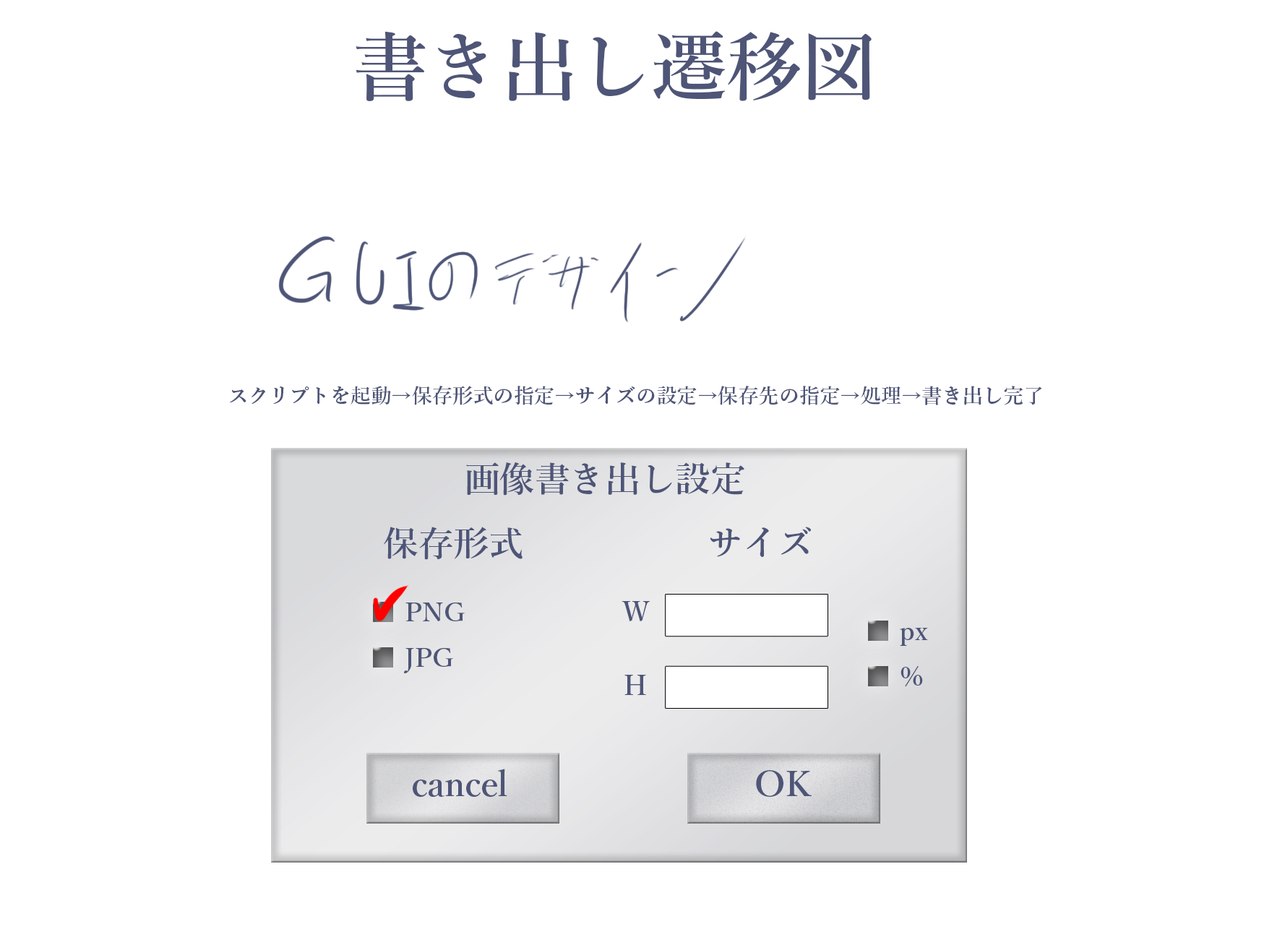
<style>
.page{position:relative;width:1272px;height:937px;background:#ffffff}
.page>*{position:absolute;margin:0}
.t1{font:74.9px "YuMin-Demibold";color:#4e5577}
.t2{font:20.4px "YuMin-Demibold";color:#4e5577}
.t3{font:35.1px "YuMin-Demibold";color:#4e5577}
.t4{font:25.9px "YuMin-Demibold";color:#4e5577}
.t5{font:27.1px/73.2px "YuMin-Demibold";color:#4e5577}
</style>
<div class="page">
<p class="t1" style="left:356px;top:31px;width:516px;height:70px">書き出し遷移図</p>
<p class="t2" style="left:230px;top:385px;width:812px;height:20px">スクリプトを起動→保存形式の指定→サイズの設定→保存先の指定→処理→書き出し完了</p>
<p class="t3" style="left:466px;top:462px;width:278px;height:34px">画像書き出し設定</p>
<p class="t3" style="left:384px;top:527px;width:139px;height:33px">保存形式</p>
<p class="t3" style="left:710px;top:527px;width:101px;height:30px">サイズ</p>
<p class="t4" style="left:404px;top:603px;width:61px;height:71px">PNG<br>JPG</p>
<p class="t5" style="left:622px;top:601px;width:28px;height:94px;text-align:center">W<br>H</p>
<p class="t4" style="left:900px;top:628px;width:28px;height:59px">px<br>%</p>
<p class="t3" style="left:413px;top:769px;width:94px;height:28px">cancel</p>
<p class="t3" style="left:756px;top:770px;width:56px;height:27px">OK</p>
</div>
